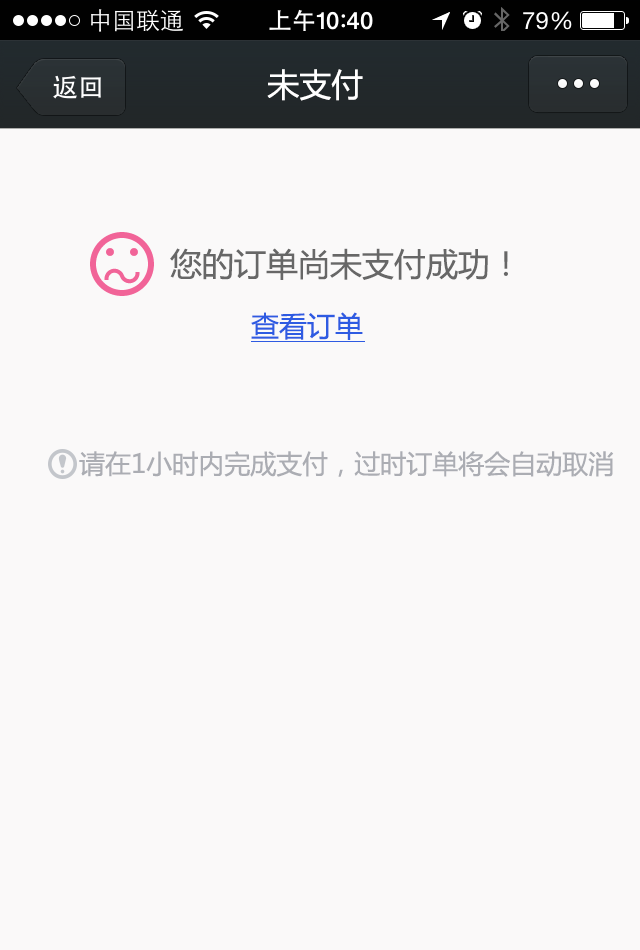
<style>
.page{position:relative;width:640px;height:950px;background:#faf9f9}
.page>*{position:absolute;margin:0}
.t1{font:32px "MicrosoftYaHei";color:#ffffff}
.t2{font:32px "MicrosoftYaHei";color:#676767}
.t3{font:28px "MicrosoftYaHei";color:#2e5be2}
.t4{font:26px "MicrosoftYaHei";color:#abadb3}
</style>
<div class="page">
<p class="t1" style="left:267px;top:69px;width:96px;height:32px">未支付</p>
<p class="t2" style="left:170px;top:248px;width:338px;height:32px">您的订单尚未支付成功！</p>
<p class="t3" style="left:251px;top:312px;width:112px;height:28px">查看订单</p>
<p class="t4" style="left:79px;top:451px;width:535px;height:26px">请在1小时内完成支付，过时订单将会自动取消</p>
</div>
